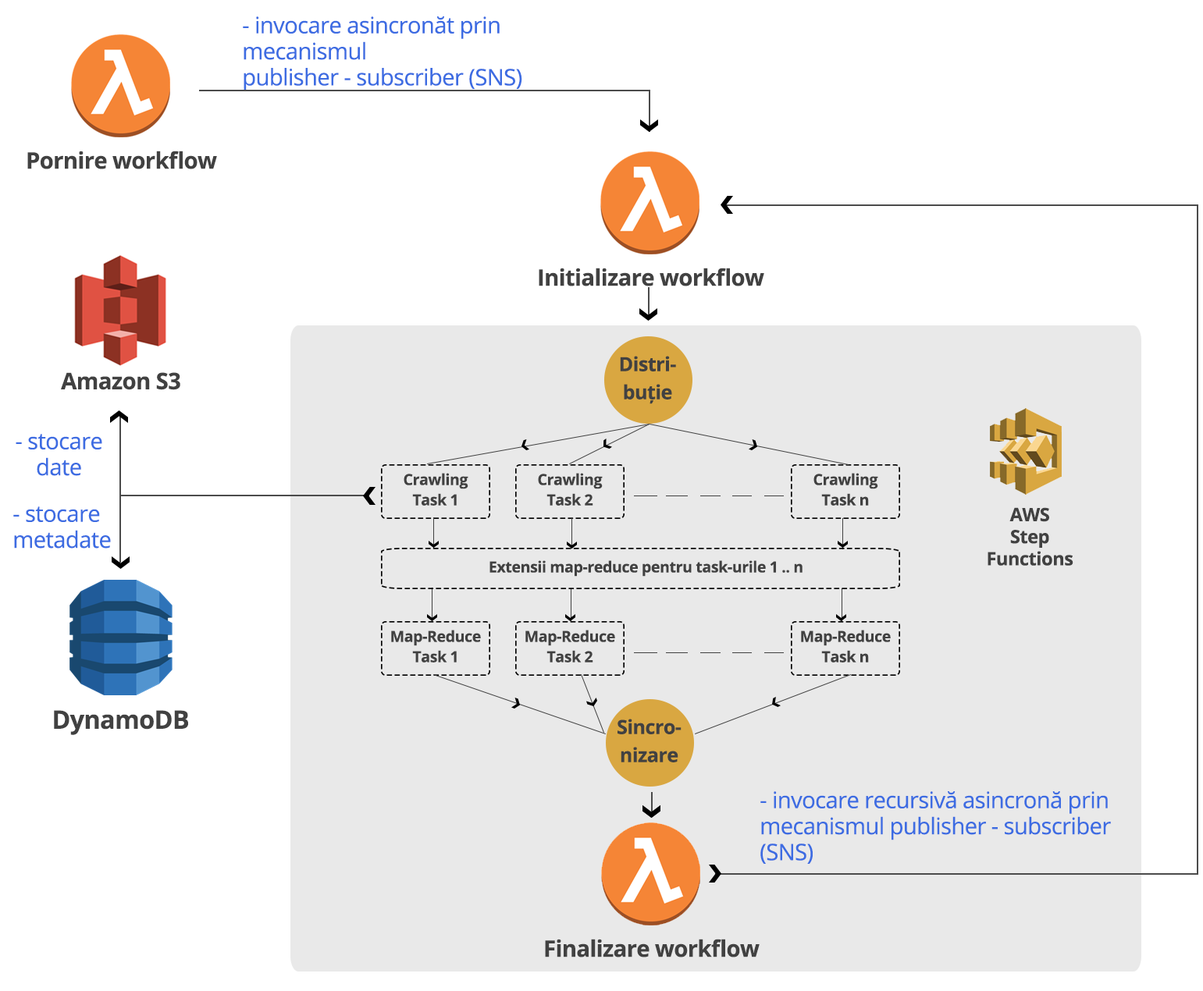
<style>
.page{position:relative;width:1203px;height:991px;background:#ffffff}
.page>*{position:absolute;margin:0}
.t1{font:22.8px/26px "OpenSans";letter-spacing:-0.02em;color:#3d6ce2}
.t2{font:22.8px "OpenSans-Bold";letter-spacing:-0.02em;color:#414141}
.t3{font:19.5px/28px "OpenSans-Bold";letter-spacing:-0.02em;color:#414141}
.t4{font:15.2px/20.3px "OpenSans-Bold";letter-spacing:-0.02em;color:#414141}
.t5{font:18.4px/22.1px "OpenSans-Bold";letter-spacing:-0.02em;color:#414141}
.t6{font:15.2px "OpenSans-Bold";letter-spacing:-0.02em;color:#414141}
.t7{font:25.3px "OpenSans-Bold";letter-spacing:-0.02em;color:#414141}
</style>
<div class="page">
<p class="t1" style="left:243px;top:16px;width:279px;height:75px">- invocare asincronăt prin mecanismul<br>publisher - subscriber (SNS)</p>
<p class="t2" style="left:27px;top:151px;width:190px;height:18px">Pornire workflow</p>
<p class="t2" style="left:539px;top:268px;width:225px;height:18px">Initializare workflow</p>
<p class="t3" style="left:620px;top:356px;width:56px;height:48px;text-align:center">Distri-<br>buție</p>
<p class="t2" style="left:61px;top:372px;width:119px;height:18px">Amazon S3</p>
<p class="t1" style="left:16px;top:434px;width:86px;height:42px;text-align:center">- stocare <br>date</p>
<p class="t4" style="left:404px;top:473px;width:64px;height:33px;text-align:center">Crawling <br>Task 1</p>
<p class="t4" style="left:538px;top:473px;width:65px;height:33px;text-align:center">Crawling <br>Task 2</p>
<p class="t4" style="left:813px;top:473px;width:65px;height:33px;text-align:center">Crawling <br>Task n</p>
<p class="t1" style="left:13px;top:507px;width:98px;height:42px">- stocare <br>metadate</p>
<p class="t5" style="left:987px;top:507px;width:86px;height:59px;text-align:center">AWS <br>Step <br>Functions</p>
<p class="t6" style="left:489px;top:560px;width:313px;height:17px">Extensii map-reduce pentru task-urile 1 .. n</p>
<p class="t4" style="left:391px;top:630px;width:90px;height:33px;text-align:center">Map-Reduce<br>Task 1</p>
<p class="t4" style="left:525px;top:630px;width:90px;height:33px;text-align:center">Map-Reduce<br>Task 2</p>
<p class="t4" style="left:801px;top:630px;width:90px;height:33px;text-align:center">Map-Reduce<br>Task n</p>
<p class="t7" style="left:54px;top:710px;width:134px;height:25px">DynamoDB</p>
<p class="t3" style="left:617px;top:719px;width:64px;height:44px;text-align:center">Sincro-<br>nizare</p>
<p class="t1" style="left:760px;top:792px;width:351px;height:72px">- invocare recursivă asincronă prin mecanismul publisher - subscriber<br>(SNS)</p>
<p class="t2" style="left:545px;top:939px;width:214px;height:19px">Finalizare workflow</p>
</div>
